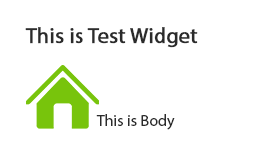
<style>
.page{position:relative;width:272px;height:159px;background:#ffffff}
.page>*{position:absolute;margin:0}
.t1{font:21.3px "MyriadPro-Regular";color:#2b2b2b;font-weight:bold}
.t2{font:12px "MyriadPro-Regular";color:#2b2b2b}
</style>
<div class="page">
<p class="t1" style="left:25px;top:27px;width:173px;height:21px">This is Test Widget</p>
<p class="t2" style="left:96px;top:114px;width:79px;height:16px">This is Body</p>
</div>
